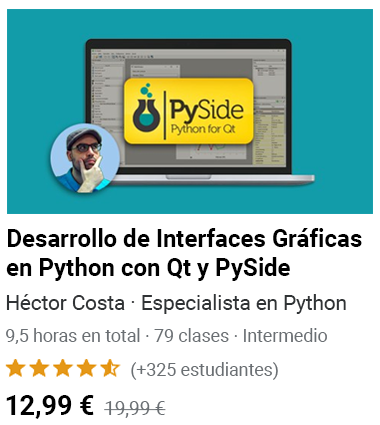
<style>
.page{position:relative;width:380px;height:425px;background:#ffffff}
.page>*{position:absolute;margin:0}
.t1{font:24.7px/28.8px "Roboto-Bold";color:#000000}
.t2{font:20.9px "Roboto-Regular";color:#303335}
.t3{font:18.3px "Roboto-Regular";color:#6a6f73;scale:0.97 1}
.t4{font:18.2px "Roboto-Regular";color:#6a6f73}
.t5{font:27.7px "Roboto-Bold";color:#000000;scale:0.97 1}
.t6{font:19.4px "Roboto-Regular";color:#6a6f73}
</style>
<div class="page">
<p class="t1" style="left:6px;top:228px;width:356px;height:53px">Desarrollo de Interfaces Gráficas en Python con Qt y PySide</p>
<p class="t2" style="left:6px;top:294px;width:340px;height:20px">Héctor Costa · Especialista en Python</p>
<p class="t3" style="left:6px;top:328px;width:321px;height:16px">9,5 horas en total · 79 clases · Intermedio</p>
<p class="t4" style="left:131px;top:362px;width:147px;height:18px">(+325 estudiantes)</p>
<p class="t5" style="left:6px;top:395px;width:88px;height:24px">12,99 €</p>
<p class="t6" style="left:104px;top:401px;width:62px;height:17px">19,99 €</p>
</div>
